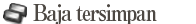
<style>
.page{position:relative;width:196px;height:24px;background:#ffffff}
.page>*{position:absolute;margin:0}
.t1{font:22px "RyuminPro-ExBold";letter-spacing:-0.08em;color:#4d4843;scale:0.9 1}
</style>
<div class="page">
<p class="t1" style="left:33px;top:4px;width:124px;height:21px">Baja tersimpan</p>
</div>
